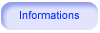
<style>
.page{position:relative;width:100px;height:33px;background:#e1e4fc}
.page>*{position:absolute;margin:0}
.t1{font:11px "ArialMT";color:#092ff6}
</style>
<div class="page">
<p class="t1" style="left:20px;top:11px;width:59px;height:8px">Informations</p>
</div>
